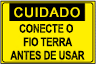
<style>
.page{position:relative;width:96px;height:64px;background:#ffef00}
.page>*{position:absolute;margin:0}
.t1{font:13px "ArialMT";letter-spacing:0.04em;color:#feec00;font-weight:bold}
.t2{font:12px/13.4px "Arial-BoldMT";letter-spacing:-0.02em;color:#020200;scale:0.78 1}
</style>
<div class="page">
<p class="t1" style="left:14px;top:7px;width:66px;height:11px">CUIDADO</p>
<p class="t2" style="left:10px;top:23px;width:75px;height:37px;text-align:center">CONECTE O <br>FIO TERRA<br>ANTES DE USAR</p>
</div>
